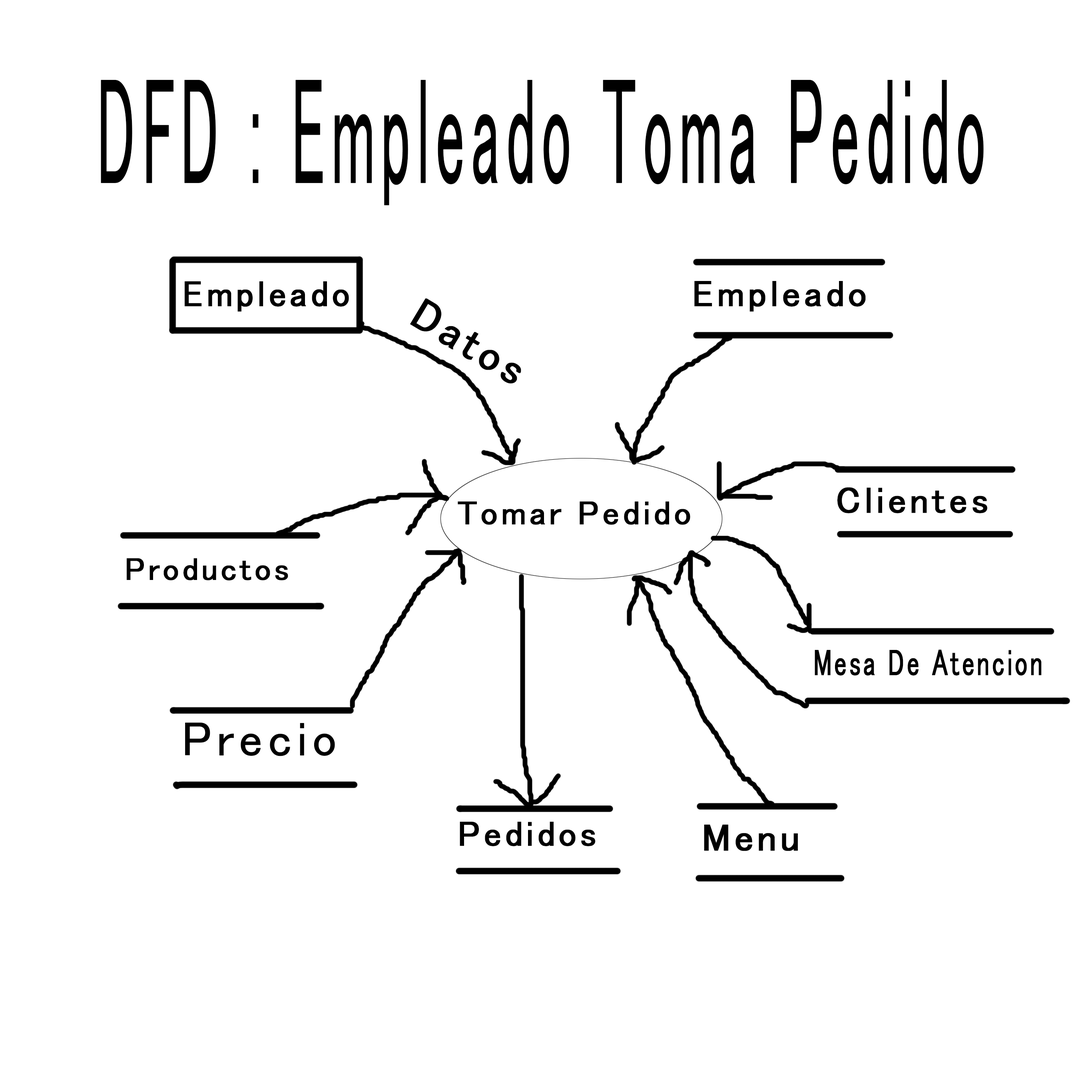
<style>
.page{position:relative;width:1092px;height:1092px;background:#ffffff}
.page>*{position:absolute;margin:0}
.t1{font:153.7px "MS-UIGothic";letter-spacing:0.075em;color:#000000;font-weight:bold;scale:0.39 1}
.t2{font:36.6px "MS-UIGothic";letter-spacing:0.075em;color:#000000;font-weight:bold}
.t3{font:37.1px "MS-UIGothic";letter-spacing:0.075em;color:#000000;font-weight:bold}
.t4{font:44.8px "MS-UIGothic";letter-spacing:0.075em;color:#000000;font-weight:bold}
.t5{font:33.9px "MS-UIGothic";letter-spacing:0.075em;color:#000000;font-weight:bold}
.t6{font:32px "MS-UIGothic";letter-spacing:0.075em;color:#000000;font-weight:bold}
.t7{font:37.1px "MS-UIGothic";letter-spacing:0.075em;color:#000000;font-weight:bold;scale:0.67 1}
.t8{font:48.3px "MS-UIGothic";letter-spacing:0.075em;color:#000000;font-weight:bold}
.t9{font:35.4px "MS-UIGothic";letter-spacing:0.075em;color:#000000;font-weight:bold}
</style>
<div class="page">
<p class="t1" style="left:101px;top:80px;width:883px;height:125px">DFD : Empleado Toma Pedido</p>
<p class="t2" style="left:185px;top:281px;width:164px;height:31px">Empleado</p>
<p class="t3" style="left:694px;top:281px;width:172px;height:31px">Empleado</p>
<p class="t4" style="left:410px;top:298px;width:111px;height:86px;rotate:31deg">Datos</p>
<p class="t3" style="left:837px;top:487px;width:150px;height:26px">Clientes</p>
<p class="t5" style="left:458px;top:501px;width:232px;height:24px">Tomar Pedido</p>
<p class="t6" style="left:127px;top:558px;width:161px;height:22px">Productos</p>
<p class="t7" style="left:815px;top:650px;width:227px;height:26px">Mesa De Atencion</p>
<p class="t8" style="left:185px;top:722px;width:150px;height:34px">Precio</p>
<p class="t9" style="left:460px;top:821px;width:136px;height:25px">Pedidos</p>
</div>
